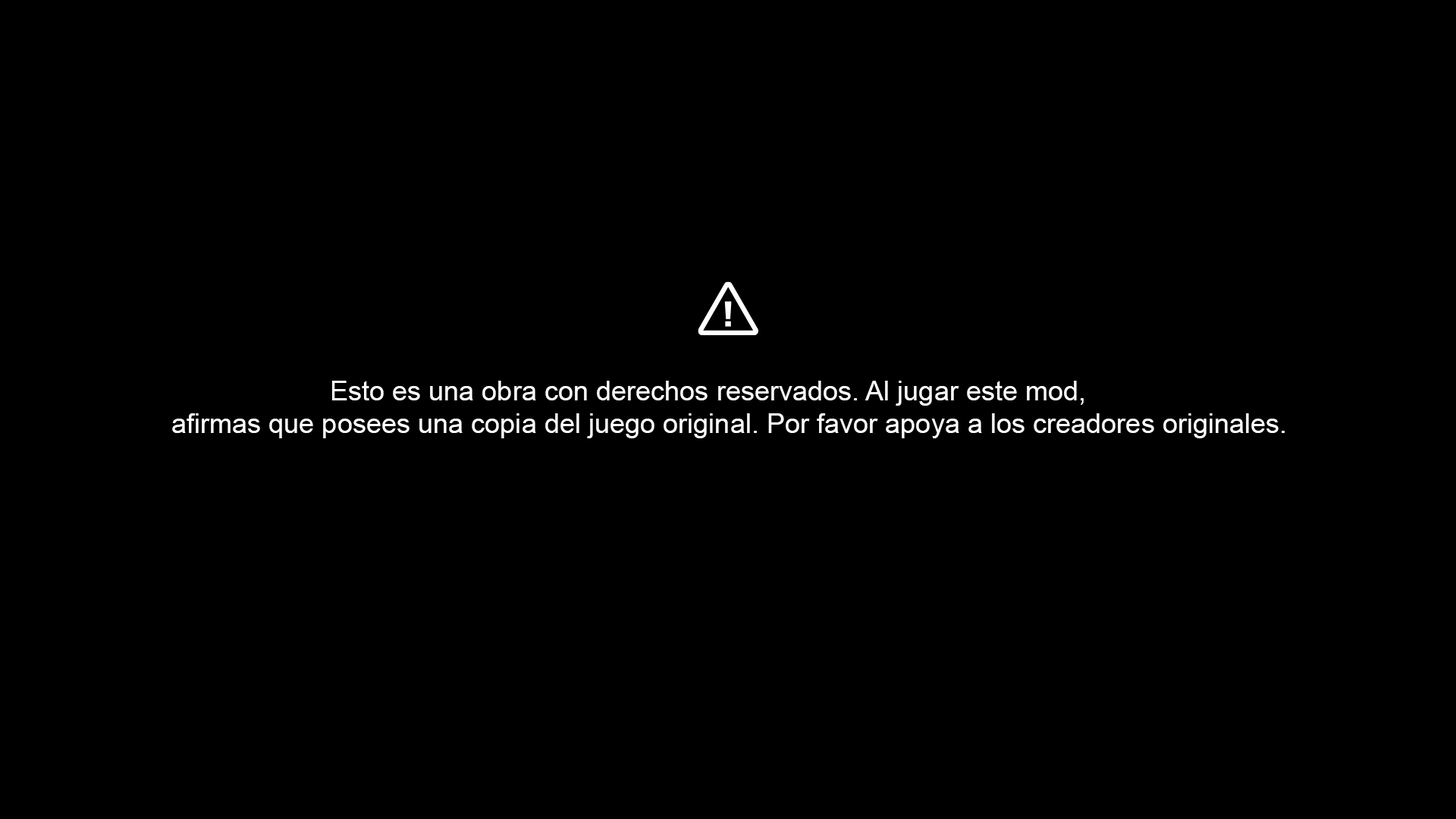
<style>
.page{position:relative;width:1456px;height:819px;background:#000000}
.page>*{position:absolute;margin:0}
.t1{font:27.4px "ArialMT";color:#ffffff}
</style>
<div class="page">
<p class="t1" style="left:172px;top:381px;width:1113px;height:57px;text-align:center">Esto es una obra con derechos reservados. Al jugar este mod,  <br> afirmas que posees una copia del juego original. Por favor apoya a los creadores originales.</p>
</div>
